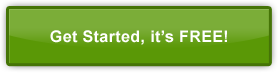
<style>
.page{position:relative;width:278px;height:73px;background:#7bad38}
.page>*{position:absolute;margin:0}
.t1{font:16px "Arial-BoldMT";letter-spacing:0.025em;color:#ffffff}
</style>
<div class="page">
<p class="t1" style="left:50px;top:30px;width:177px;height:15px">Get Started, it’s FREE!</p>
</div>
